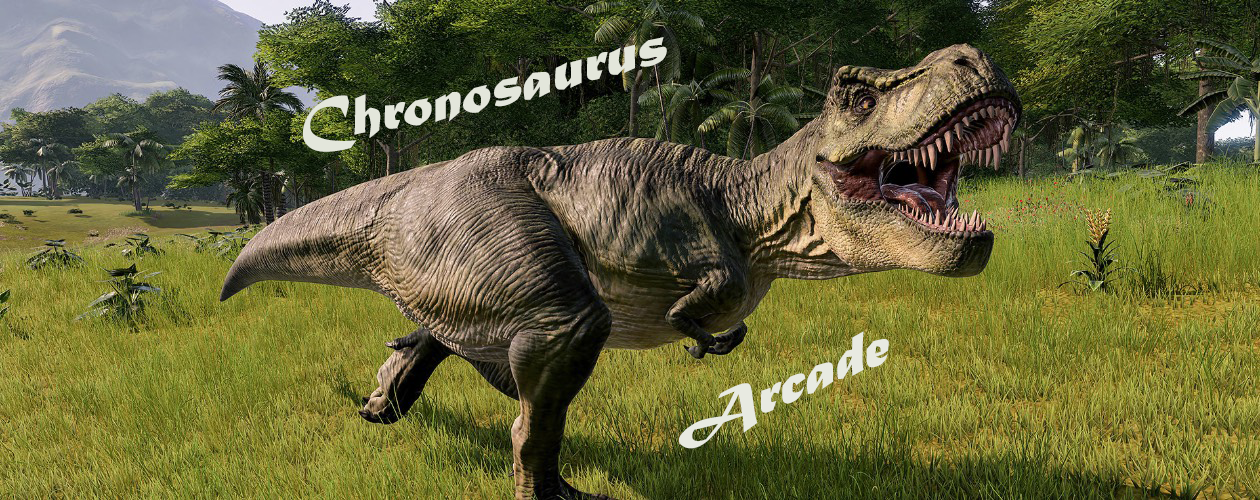
<style>
.page{position:relative;width:1260px;height:500px}
.page>*{position:absolute;margin:0}
.t1{font:60px "MaturaMTScriptCapitals";color:#e3e6db}
.t2{font:60px "MaturaMTScriptCapitals";color:#e7eae0}
</style>
<div class="page">
<p class="t1" style="left:302px;top:37px;width:365px;height:115px">Chronosaurus</p>
<p class="t2" style="left:679px;top:331px;width:210px;height:118px">Arcade</p>
</div>
